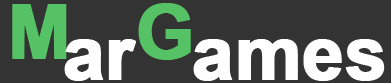
<style>
.page{position:relative;width:391px;height:83px;background:#333333}
.page>*{position:absolute;margin:0}
.t1{font:74.6px "Arial-BoldMT";letter-spacing:-0.01em;color:#55c265;font-weight:bold}
.t2{font:74.6px "Arial-BoldMT";letter-spacing:-0.01em;color:#ffffff;font-weight:bold}
</style>
<div class="page">
<p class="t1" style="left:12px;top:4px;width:55px;height:55px">M</p>
<p class="t1" style="left:138px;top:3px;width:53px;height:57px">G</p>
<p class="t2" style="left:64px;top:39px;width:72px;height:42px">ar</p>
<p class="t2" style="left:193px;top:39px;width:192px;height:42px">ames</p>
</div>
